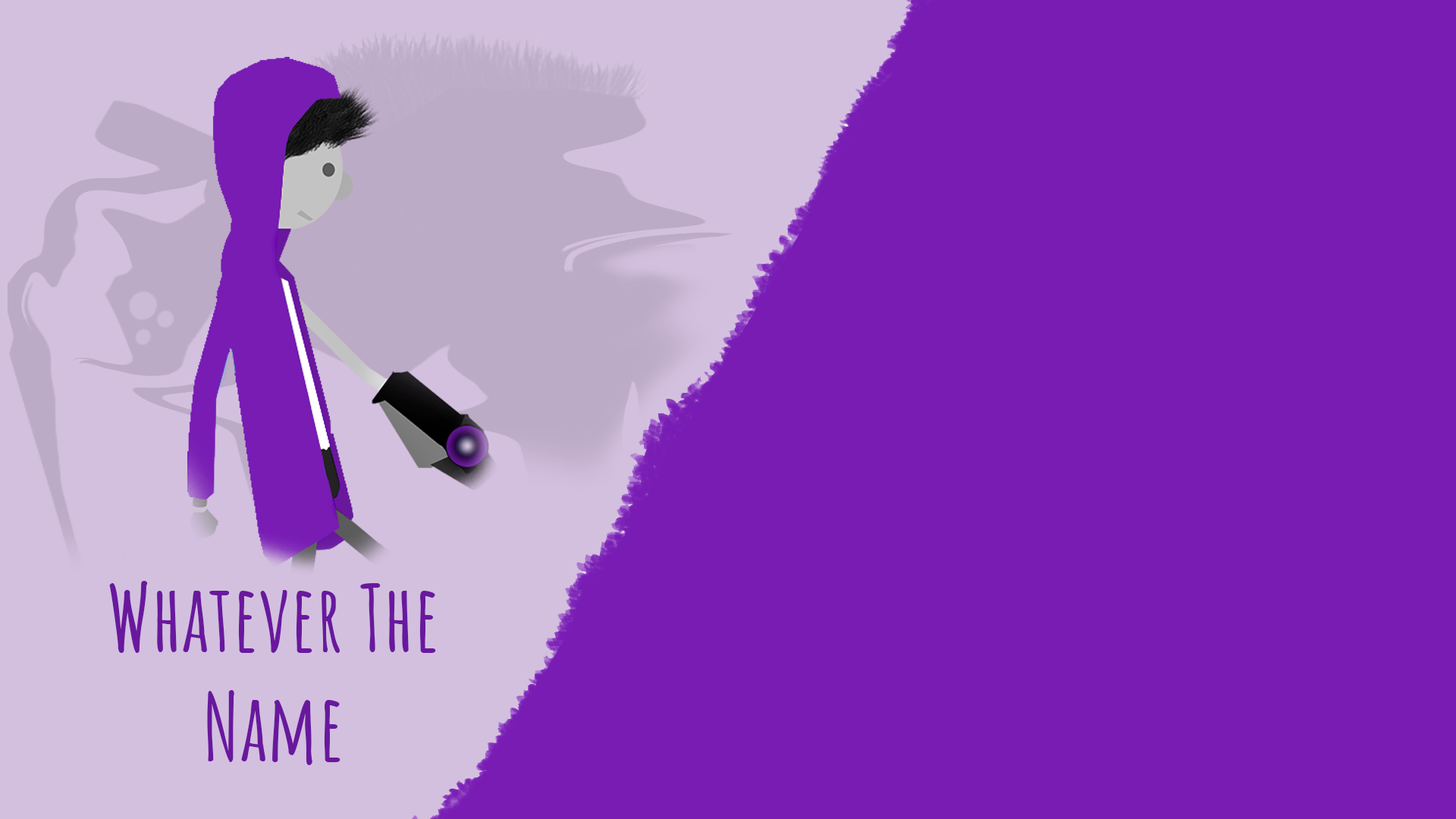
<style>
.page{position:relative;width:1456px;height:819px;background:#781cb4}
.page>*{position:absolute;margin:0}
.t1{font:91px "AmaticSC-Bold";color:#69189e}
</style>
<div class="page">
<p class="t1" style="left:109px;top:581px;width:327px;height:184px;text-align:center">Whatever The<br>Name</p>
</div>
